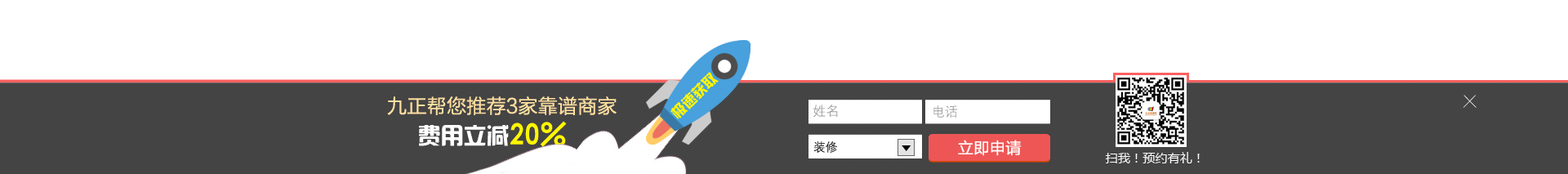
<style>
.page{position:relative;width:1568px;height:174px;background:#ffffff}
.page>*{position:absolute;margin:0}
.t1{font:14.1px "¹ã½Ý¾ÓÃÔÄã×Ö¿â";color:#fef500}
.t2{font:19.8px "FZLTHK--GBK1-0";color:#ffdf9f}
.t3{font:15.8px "FZLTCXHJW--GB1-0";letter-spacing:0.005em;scale:1.27 1}
.t4{font:13.1px "DenshanCSEG-Light-GB";letter-spacing:0.005em;color:#9d9d9d}
.t5{font:22.6px "hzgb";letter-spacing:0.01em;color:#ffffff}
.t6{font:26.9px "hzgb";letter-spacing:0.01em;color:#fff600}
.t7{font:11.9px "DenshanCSEG-Light-GB";letter-spacing:0.005em;color:#121212}
.t8{font:15.6px "MicrosoftYaHei";letter-spacing:0.025em;color:#ffffff}
.t9{font:12.3px "MicrosoftYaHei";letter-spacing:0.005em;color:#ffffff}
</style>
<div class="page">
<p class="t1" style="left:670px;top:72px;width:49px;height:47px;rotate:-44deg">极速获取</p>
<p class="t2" style="left:387px;top:96px;width:230px;height:19px">九正帮您推荐3家靠谱商家</p>
<p class="t3" style="left:1463px;top:95px;width:14px;height:13px">X</p>
<p class="t4" style="left:813px;top:105px;width:25px;height:13px">姓名</p>
<p class="t4" style="left:933px;top:105px;width:25px;height:13px">电话</p>
<p class="t5" style="left:419px;top:121px;width:148px;height:26px">费用立减<span class="t6">20%</span></p>
<p class="t7" style="left:813px;top:141px;width:24px;height:12px">装修</p>
<p class="t8" style="left:958px;top:140px;width:64px;height:16px">立即申请</p>
<p class="t9" style="left:1105px;top:152px;width:95px;height:11px">扫我！预约有礼！</p>
</div>
